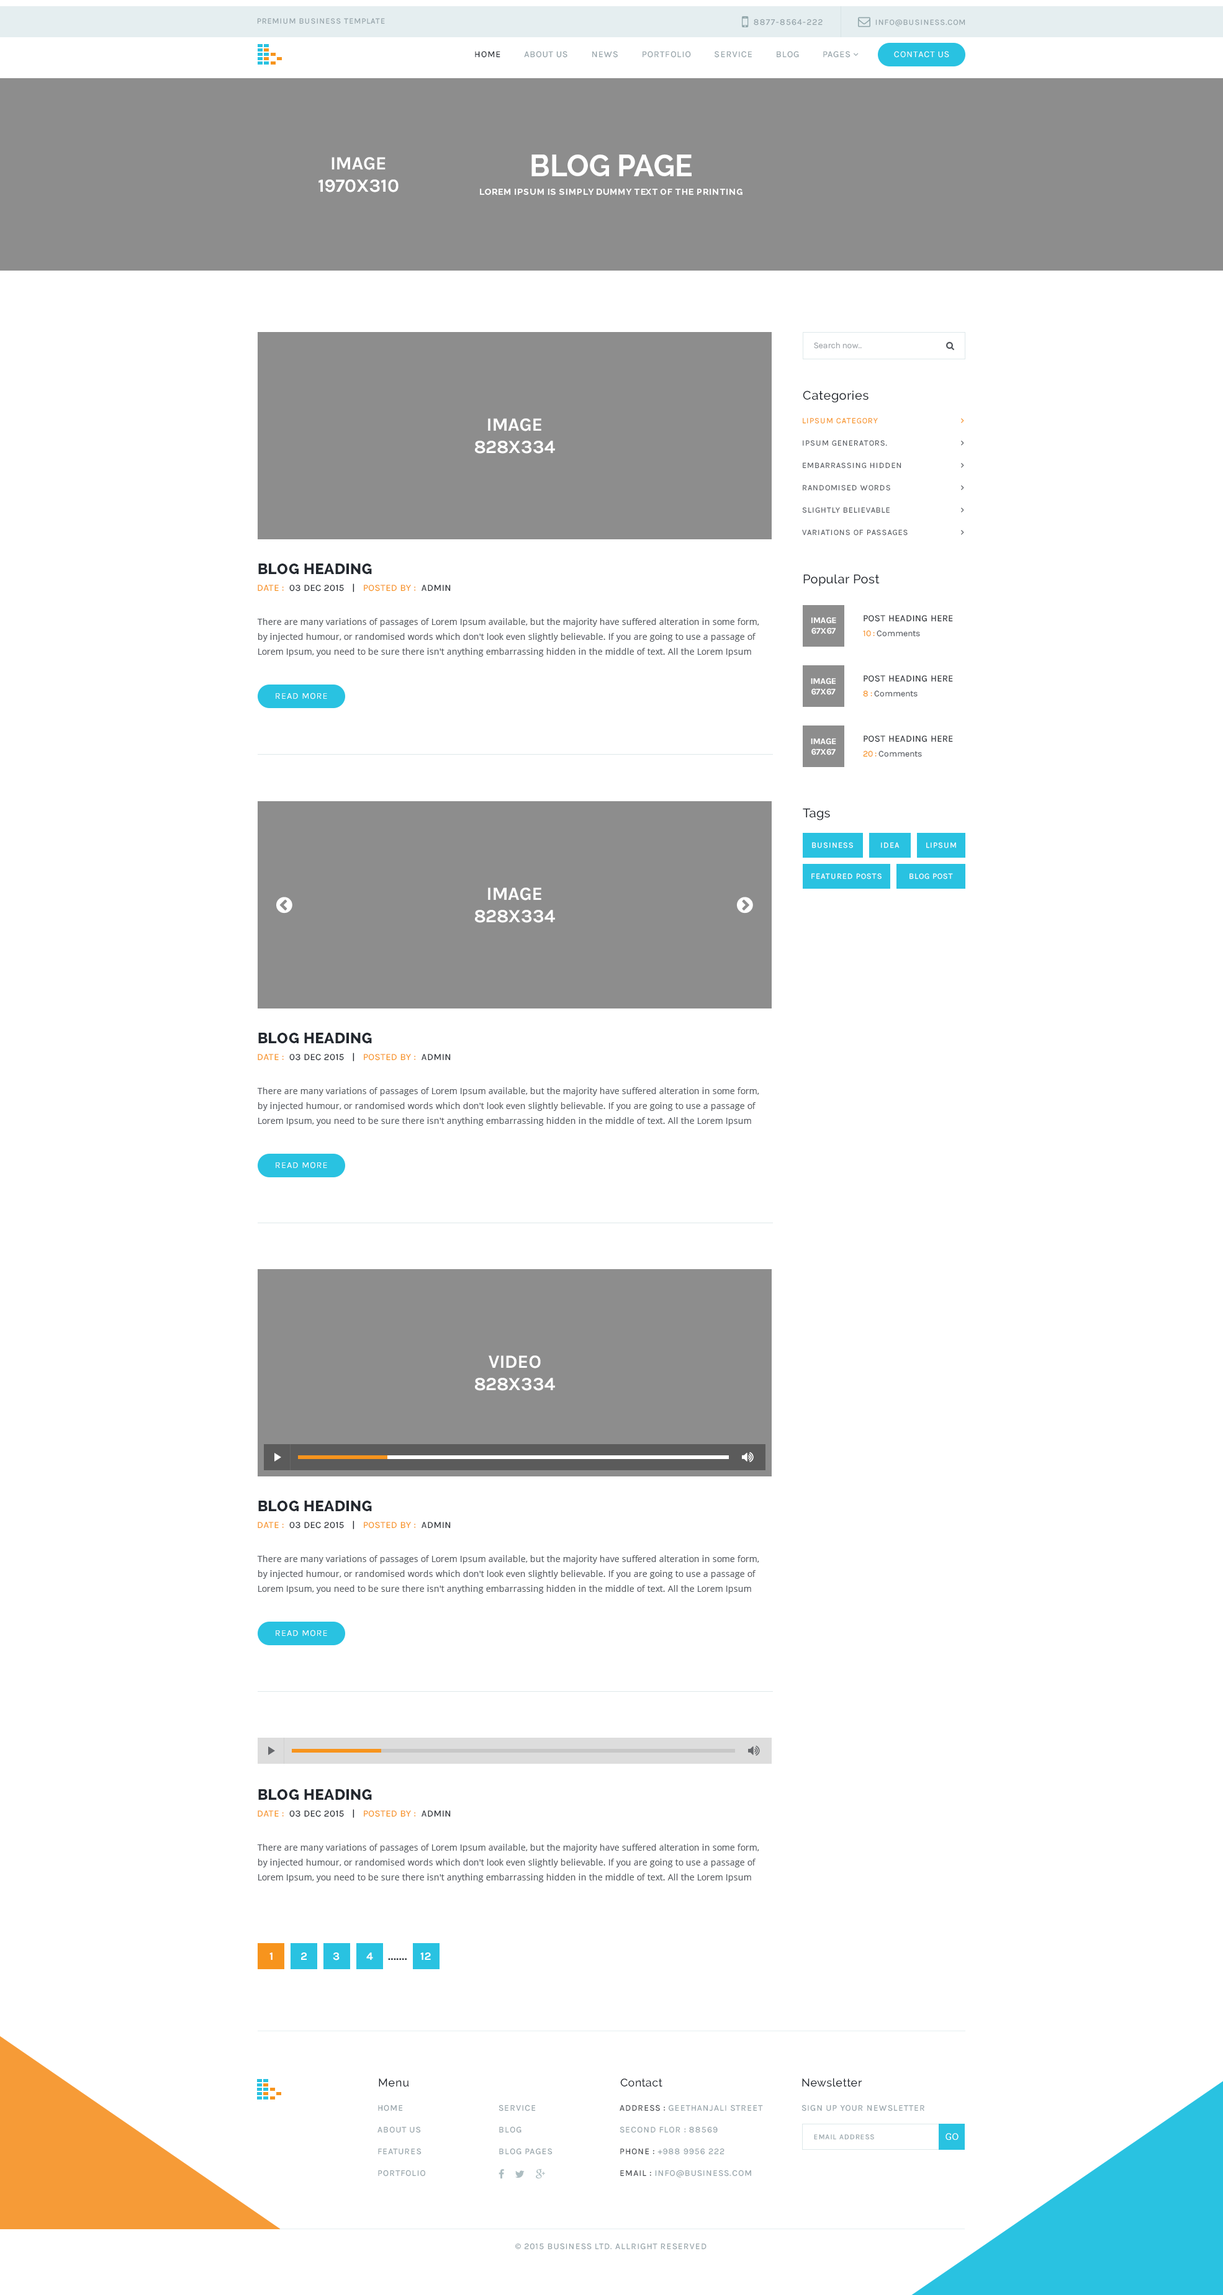
<style>
.page{position:relative;width:1223px;height:2295px;background:#ffffff}
.page>*{position:absolute;margin:0}
.t1{font:8.1px "Karla-Regular";letter-spacing:0.075em;color:#93a1a7;text-transform:uppercase}
.t2{font:8.7px "Karla-Regular";letter-spacing:0.075em;color:#93a1a7;text-transform:uppercase}
.t3{font:9px "Karla-Regular";letter-spacing:0.075em;color:#93a1a7;text-transform:uppercase}
.t4{font:9px "Karla-Regular";letter-spacing:0.075em;color:#23282f;text-transform:uppercase}
.t5{font:9px "Karla-Regular";letter-spacing:0.075em;color:#ffffff;text-transform:uppercase}
.t6{font:18.6px "Karla-Bold";letter-spacing:-0.01em;color:#ffffff;text-transform:uppercase}
.t7{font:8.7px/18.6px "Raleway-Bold";letter-spacing:0.075em;color:#ffffff;text-transform:uppercase}
.t8{font:29.8px/18.6px "Raleway-Bold";color:#ffffff;text-transform:uppercase}
.t9{font:8.7px "Karla-Regular";color:#a1a5aa}
.t10{font:12.4px "Raleway-Medium";letter-spacing:0.025em;color:#23282f}
.t11{font:8.1px/22.3px "Karla-Regular";letter-spacing:0.075em;color:#55595f;text-transform:uppercase}
.t12{font:8.1px/22.3px "Karla-Regular";letter-spacing:0.075em;color:#f7941d;text-transform:uppercase}
.t13{font:14.9px "Raleway-ExtraBold";letter-spacing:0.025em;color:#23282f;text-transform:uppercase}
.t14{font:9.3px "Karla-Regular";letter-spacing:0.025em;color:#23282f;text-transform:uppercase}
.t15{font:9.3px "Karla-Regular";letter-spacing:0.025em;color:#f7941d;text-transform:uppercase}
.t16{font:8.7px "Karla-Bold";letter-spacing:-0.01em;color:#ffffff;text-transform:uppercase}
.t17{font:9.3px/14.9px "Karla-Regular";letter-spacing:0.025em;color:#23282f;text-transform:uppercase}
.t18{font:8.7px/14.9px "Karla-Regular";color:#f7941d}
.t19{font:8.7px/14.9px "Karla-Regular";color:#55595f}
.t20{font:8.7px/14.9px "OpenSans";color:#55595f}
.t21{font:8.1px "Karla-Regular";letter-spacing:0.075em;color:#ffffff;text-transform:uppercase}
.t22{font:11.2px "Karla-Bold";letter-spacing:0.025em;color:#ffffff;text-transform:uppercase}
.t23{font:11.2px "Karla-Bold";letter-spacing:0.025em;color:#23282f;text-transform:uppercase}
.t24{font:11.2px "Raleway-Medium";letter-spacing:0.025em;color:#23282f}
.t25{font:8.7px/21.7px "Karla-Regular";letter-spacing:0.075em;color:#93a1a7;text-transform:uppercase}
.t26{font:8.7px/21.7px "Karla-Regular";letter-spacing:0.075em;color:#3e4146;text-transform:uppercase}
.t27{font:7.4px "Karla-Regular";letter-spacing:0.075em;color:#93a1a7;text-transform:uppercase}
.t28{font:9.3px "RobotoSlab-Regular";letter-spacing:0.025em;color:#ffffff}
.t29{font:8.7px "MyriadPro-Regular";letter-spacing:0.075em;color:#93a1a7;text-transform:uppercase}
</style>
<div class="page">
<p class="t1" style="left:257px;top:18px;width:128px;height:6px">premium business template</p>
<p class="t2" style="left:754px;top:19px;width:68px;height:6px">8877-8564-222</p>
<p class="t1" style="left:875px;top:19px;width:90px;height:8px">info@business.com</p>
<p class="t3" style="left:475px;top:51px;width:375px;height:7px"><span class="t4">Home         </span>About Us         News         Portfolio         Service         Blog         Pages</p>
<p class="t5" style="left:894px;top:51px;width:55px;height:7px">Contact Us</p>
<p class="t6" style="left:318px;top:157px;width:80px;height:35px;text-align:center">Image<br>1970x310</p>
<p class="t7" style="left:480px;top:155px;width:262px;height:40px;text-align:center"><span class="t8">Blog Page<br></span>Lorem Ipsum is simply dummy text of the printing</p>
<p class="t9" style="left:814px;top:342px;width:48px;height:7px">Search now..</p>
<p class="t10" style="left:803px;top:390px;width:65px;height:13px">Categories</p>
<p class="t6" style="left:475px;top:418px;width:80px;height:36px;text-align:center">Image<br>828x334</p>
<p class="t11" style="left:802px;top:418px;width:105px;height:118px"><span class="t12">Lipsum Category<br></span>Ipsum generators.<br>embarrassing hidden<br>randomised words<br>slightly believable<br>variations of passages</p>
<p class="t13" style="left:258px;top:564px;width:114px;height:11px">Blog Heading</p>
<p class="t10" style="left:803px;top:574px;width:77px;height:13px">Popular Post</p>
<p class="t14" style="left:258px;top:583px;width:193px;height:9px"><span class="t15">Date :</span>  03 Dec 2015   |   <span class="t15">posted By :</span>  Admin</p>
<p class="t16" style="left:811px;top:617px;width:25px;height:17px;text-align:center">Image<br>67X67</p>
<p class="t17" style="left:863px;top:615px;width:90px;height:22px">Post Heading Here<br><span class="t18">10 :</span><span class="t19"> Comments</span></p>
<p class="t20" style="left:257px;top:618px;width:502px;height:39px">There are many variations of passages of Lorem Ipsum available, but the majority have suffered alteration in some form, by injected humour, or randomised words which don't look even slightly believable. If you are going to use a passage of Lorem Ipsum, you need to be sure there isn't anything embarrassing hidden in the middle of text. All the Lorem Ipsum generators.</p>
<p class="t16" style="left:811px;top:678px;width:25px;height:17px;text-align:center">Image<br>67X67</p>
<p class="t17" style="left:863px;top:675px;width:90px;height:22px">Post Heading Here<br><span class="t18">8 :</span><span class="t19"> Comments</span></p>
<p class="t5" style="left:276px;top:693px;width:51px;height:7px">Read more</p>
<p class="t17" style="left:863px;top:736px;width:90px;height:21px">Post Heading Here<br><span class="t18">20 :</span><span class="t19"> Comments</span></p>
<p class="t16" style="left:811px;top:738px;width:25px;height:17px;text-align:center">Image<br>67X67</p>
<p class="t10" style="left:803px;top:808px;width:27px;height:13px">Tags</p>
<p class="t21" style="left:812px;top:842px;width:41px;height:6px">Business</p>
<p class="t21" style="left:881px;top:842px;width:18px;height:6px">Idea</p>
<p class="t21" style="left:926px;top:842px;width:30px;height:6px">Lipsum</p>
<p class="t21" style="left:811px;top:873px;width:70px;height:7px">Featured posts</p>
<p class="t21" style="left:909px;top:873px;width:44px;height:7px">Blog post</p>
<p class="t6" style="left:475px;top:888px;width:80px;height:35px;text-align:center">Image<br>828x334</p>
<p class="t13" style="left:258px;top:1033px;width:114px;height:11px">Blog Heading</p>
<p class="t14" style="left:258px;top:1053px;width:193px;height:8px"><span class="t15">Date :</span>  03 Dec 2015   |   <span class="t15">posted By :</span>  Admin</p>
<p class="t20" style="left:257px;top:1087px;width:502px;height:39px">There are many variations of passages of Lorem Ipsum available, but the majority have suffered alteration in some form, by injected humour, or randomised words which don't look even slightly believable. If you are going to use a passage of Lorem Ipsum, you need to be sure there isn't anything embarrassing hidden in the middle of text. All the Lorem Ipsum generators.</p>
<p class="t5" style="left:276px;top:1162px;width:51px;height:7px">Read more</p>
<p class="t6" style="left:475px;top:1356px;width:80px;height:35px;text-align:center">video<br>828x334</p>
<p class="t13" style="left:258px;top:1501px;width:114px;height:11px">Blog Heading</p>
<p class="t14" style="left:258px;top:1521px;width:193px;height:8px"><span class="t15">Date :</span>  03 Dec 2015   |   <span class="t15">posted By :</span>  Admin</p>
<p class="t20" style="left:257px;top:1555px;width:502px;height:39px">There are many variations of passages of Lorem Ipsum available, but the majority have suffered alteration in some form, by injected humour, or randomised words which don't look even slightly believable. If you are going to use a passage of Lorem Ipsum, you need to be sure there isn't anything embarrassing hidden in the middle of text. All the Lorem Ipsum generators.</p>
<p class="t5" style="left:276px;top:1630px;width:51px;height:7px">Read more</p>
<p class="t13" style="left:258px;top:1789px;width:114px;height:12px">Blog Heading</p>
<p class="t14" style="left:258px;top:1809px;width:193px;height:9px"><span class="t15">Date :</span>  03 Dec 2015   |   <span class="t15">posted By :</span>  Admin</p>
<p class="t20" style="left:257px;top:1844px;width:502px;height:39px">There are many variations of passages of Lorem Ipsum available, but the majority have suffered alteration in some form, by injected humour, or randomised words which don't look even slightly believable. If you are going to use a passage of Lorem Ipsum, you need to be sure there isn't anything embarrassing hidden in the middle of text. All the Lorem Ipsum generators.</p>
<p class="t22" style="left:269px;top:1953px;width:3px;height:7px">1</p>
<p class="t22" style="left:301px;top:1953px;width:6px;height:7px">2</p>
<p class="t22" style="left:333px;top:1953px;width:7px;height:8px">3</p>
<p class="t22" style="left:366px;top:1953px;width:7px;height:7px">4</p>
<p class="t23" style="left:388px;top:1958px;width:19px;height:3px">.......</p>
<p class="t22" style="left:420px;top:1953px;width:11px;height:7px">12</p>
<p class="t24" style="left:379px;top:2079px;width:30px;height:8px">Menu</p>
<p class="t24" style="left:620px;top:2079px;width:42px;height:8px">Contact</p>
<p class="t24" style="left:802px;top:2078px;width:60px;height:9px">Newsletter</p>
<p class="t25" style="left:377px;top:2105px;width:48px;height:72px">Home<br>About Us<br>Features<br>Portfolio</p>
<p class="t25" style="left:498px;top:2105px;width:54px;height:50px">Service<br>Blog<br>Blog Pages</p>
<p class="t25" style="left:619px;top:2105px;width:144px;height:73px"><span class="t26">Address : </span>Geethanjali street<br>Second flor : 88569<br><span class="t26">Phone :</span> +988 9956 222<br><span class="t26">Email :</span> info@business.com</p>
<p class="t2" style="left:801px;top:2105px;width:123px;height:7px">Sign up your newsletter</p>
<p class="t27" style="left:814px;top:2135px;width:60px;height:5px">Email Address</p>
<p class="t28" style="left:945px;top:2133px;width:13px;height:8px">GO</p>
<p class="t2" style="left:515px;top:2243px;width:191px;height:7px"><span class="t29">©</span> 2015 business Ltd. allright reserved</p>
</div>
